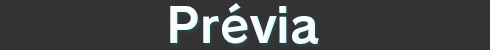
<style>
.page{position:relative;width:490px;height:50px;background:#333333}
.page>*{position:absolute;margin:0}
.t1{font:48px "RodinPro-B";color:#fffeff}
</style>
<div class="page">
<p class="t1" style="left:170px;top:3px;width:149px;height:41px">Prévia</p>
</div>
